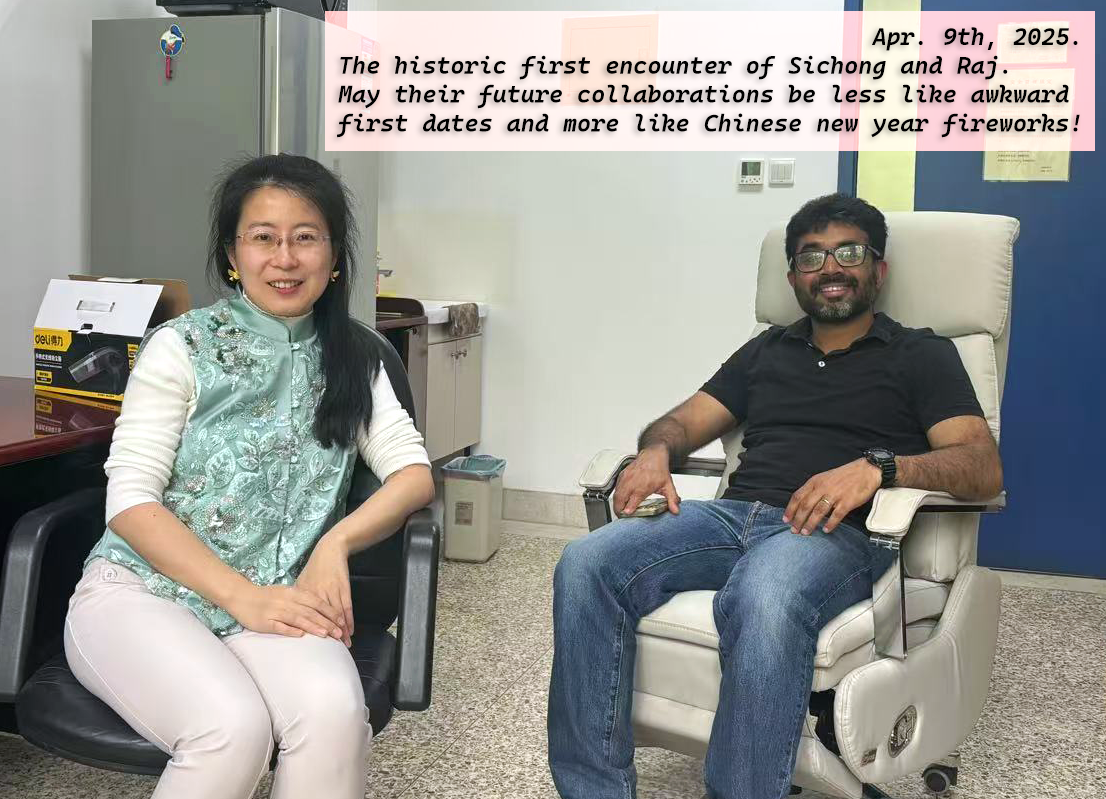
<style>
.page{position:relative;width:1106px;height:799px}
.page>*{position:absolute;margin:0}
.t1{font:24px "CascadiaMono-SemiBoldItalic";color:#000000}
</style>
<div class="page">
<p class="t1" style="left:337px;top:27px;width:743px;height:111px">Apr. 9th, 2025. <br>The historic first encounter of Sichong and Raj. <br>May their future collaborations be less like awkward <br>first dates and more like Chinese new year fireworks!</p>
</div>
